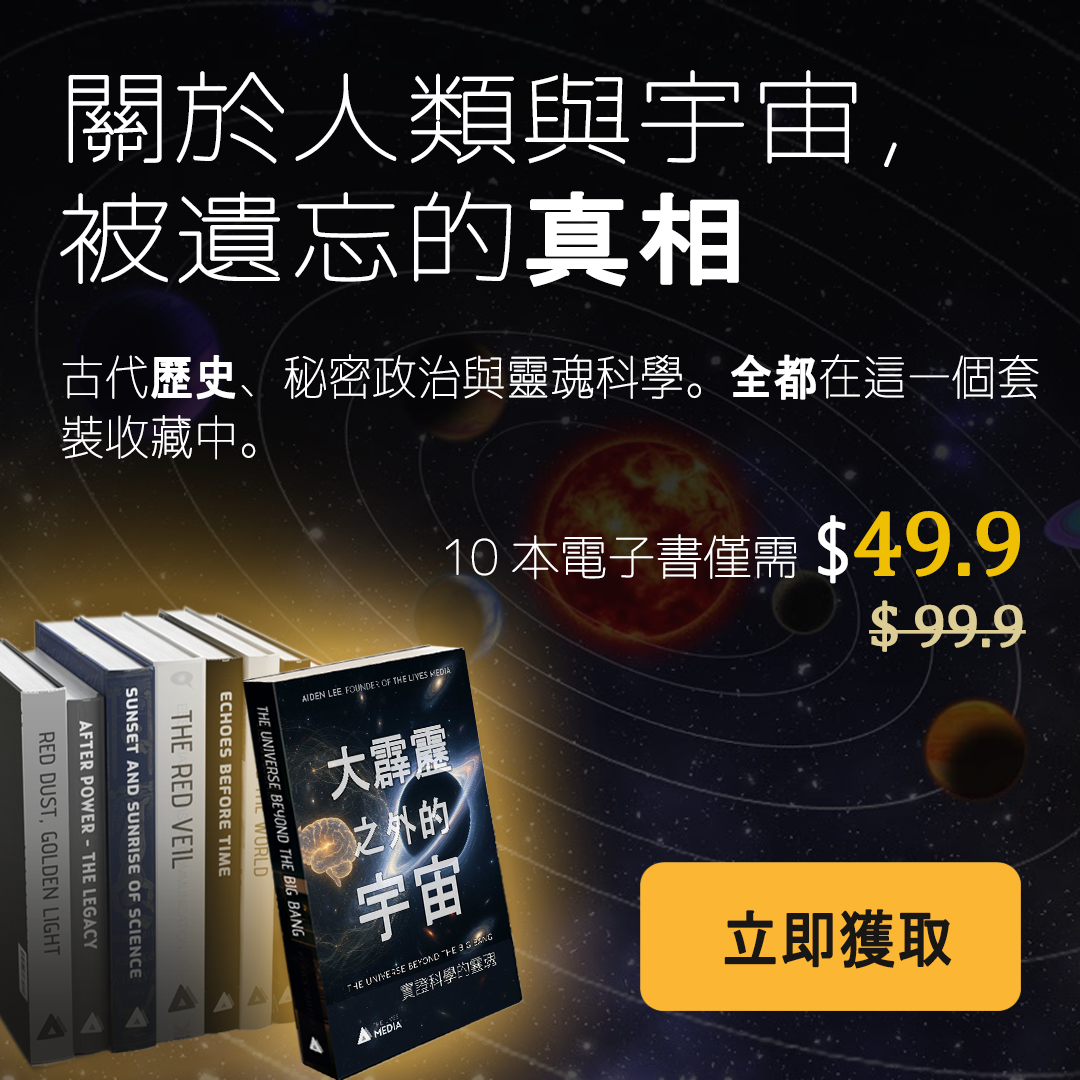
<style>
.page{position:relative;width:1080px;height:1080px}
.page>*{position:absolute;margin:0}
.t1{font:100.8px/120px "Chogokuboso-Gothic";letter-spacing:0.005em;color:#ffffff;font-weight:bold;scale:1.11 1}
.t2{font:100.8px/120px "MS-Gothic";letter-spacing:0.005em;color:#ffffff;font-weight:bold;scale:1.11 1}
.t3{font:48px/60px "Chogokuboso-Gothic";letter-spacing:0.005em;color:#ffffff;font-weight:bold;scale:0.9 1}
.t4{font:48px/60px "MS-Gothic";letter-spacing:0.005em;color:#ffffff;font-weight:bold;scale:0.9 1}
.t5{font:48px "Chogokuboso-Gothic";letter-spacing:-0.025em;color:#ffffff;font-weight:bold}
.t6{font:72px "MalgunGothic-Semilight";letter-spacing:-0.025em;color:#ffffff;font-weight:bold}
.t7{font:92px "Cambria";letter-spacing:-0.025em;color:#efbf04;font-weight:bold}
.t8{font:60px "Cambria";letter-spacing:-0.025em;color:#dbcd95;font-weight:bold}
.t9{font:60px "Cambria";letter-spacing:-0.025em;color:#efbf04;font-weight:bold}
.t10{font:63px "MS-Gothic";color:#191616;font-weight:bold;scale:0.9 1}
</style>
<div class="page">
<p class="t1" style="left:60px;top:70px;width:837px;height:217px">關於人類與宇宙，<br>被遺忘的<span class="t2">真相</span></p>
<p class="t3" style="left:62px;top:354px;width:977px;height:106px">古代<span class="t4">歷史</span>、秘密政治與靈魂科學。<span class="t4">全都</span>在這一個套裝收藏中。</p>
<p class="t5" style="left:446px;top:511px;width:574px;height:73px">10 本電子書僅需 <span class="t6">$</span><span class="t7">49.9</span></p>
<p class="t8" style="left:869px;top:600px;width:157px;height:52px"><span class="t9"> </span>$ 99.9</p>
<p class="t10" style="left:724px;top:909px;width:228px;height:60px">立即獲取</p>
</div>
